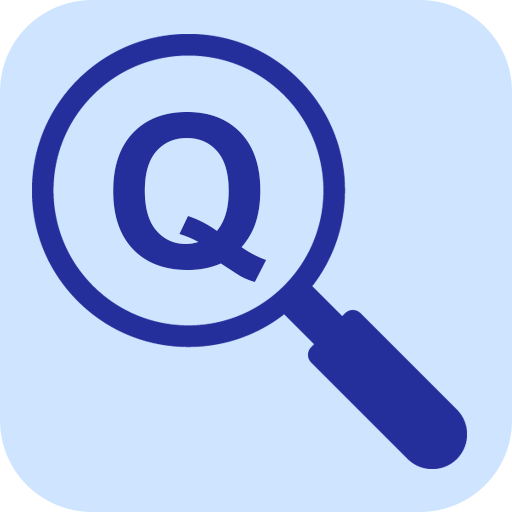
<style>
.page{position:relative;width:512px;height:512px;background:#cfe5ff}
.page>*{position:absolute;margin:0}
.t1{font:212.4px "Arial-BoldMT";color:#252f9c}
</style>
<div class="page">
<p class="t1" style="left:113px;top:112px;width:154px;height:170px">Q</p>
</div>
